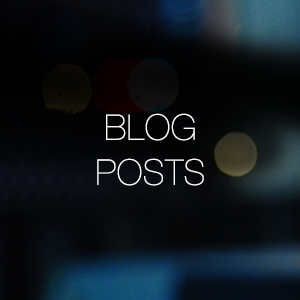
<style>
.page{position:relative;width:300px;height:300px}
.page>*{position:absolute;margin:0}
.t1{font:35px/45px "HelveticaNeue-UltraLight";color:#ffffff;font-weight:bold}
</style>
<div class="page">
<p class="t1" style="left:97px;top:113px;width:107px;height:73px;text-align:center">BLOG<br>POSTS</p>
</div>
